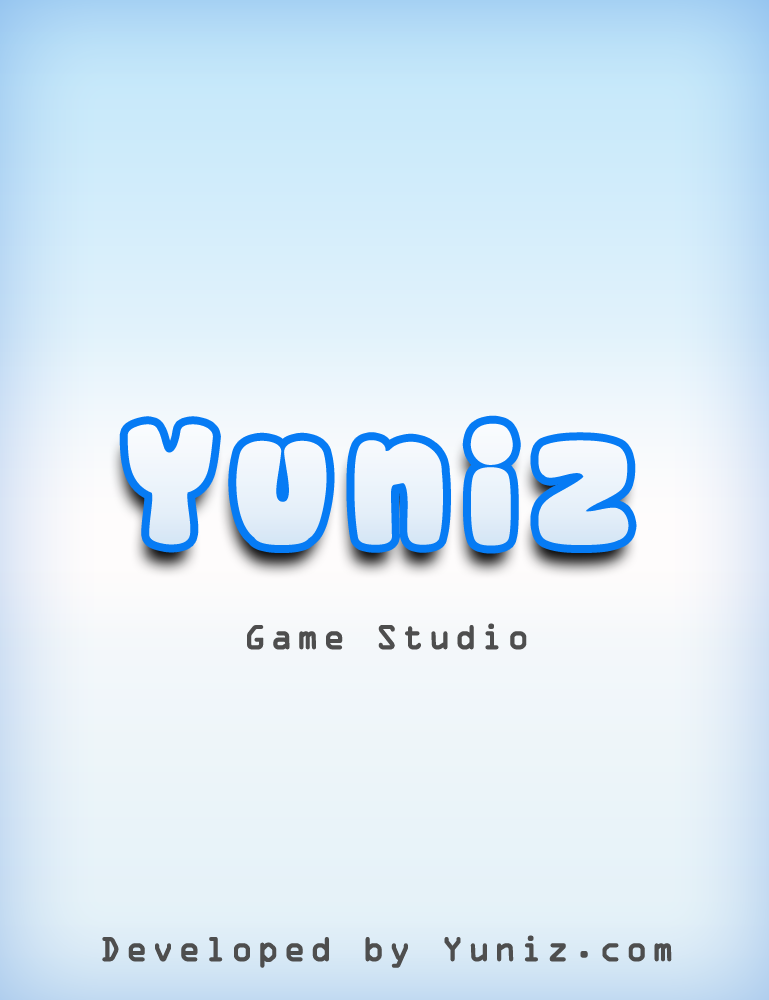
<style>
.page{position:relative;width:769px;height:1000px}
.page>*{position:absolute;margin:0}
.t1{font:160px "Cookies";letter-spacing:0.1em;color:#fefcfc;font-weight:bold}
.t2{font:36px "OCRAExtended";letter-spacing:0.1em;color:#4e4e4e;font-weight:bold}
</style>
<div class="page">
<p class="t1" style="left:127px;top:423px;width:502px;height:123px">Yuniz</p>
<p class="t2" style="left:247px;top:623px;width:280px;height:27px">Game Studio</p>
<p class="t2" style="left:102px;top:935px;width:570px;height:33px">Developed by Yuniz.com</p>
</div>
